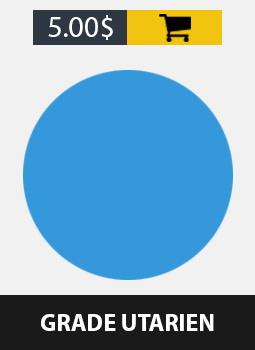
<style>
.page{position:relative;width:255px;height:350px;background:#f1f1f1}
.page>*{position:absolute;margin:0}
.t1{font:30px "MyriadPro-Regular";color:#ffffff}
.t2{font:24px "MyriadPro-Bold";color:#ffffff}
</style>
<div class="page">
<p class="t1" style="left:48px;top:15px;width:65px;height:25px">5.00$</p>
<p class="t2" style="left:41px;top:314px;width:173px;height:17px">GRADE UTARIEN</p>
</div>
